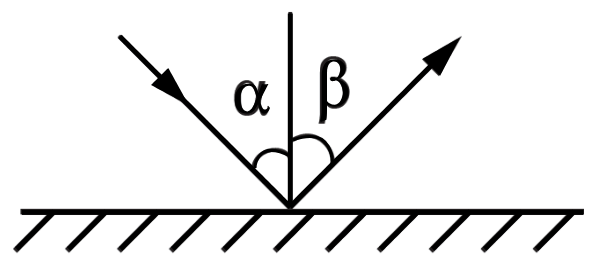
<style>
.page{position:relative;width:599px;height:263px;background:#ffffff}
.page>*{position:absolute;margin:0}
.t1{font:67px "LibertinusMath-Regular";color:#000000}
</style>
<div class="page">
<p class="t1" style="left:320px;top:59px;width:29px;height:63px">β</p>
<p class="t1" style="left:234px;top:83px;width:37px;height:31px">α</p>
</div>
